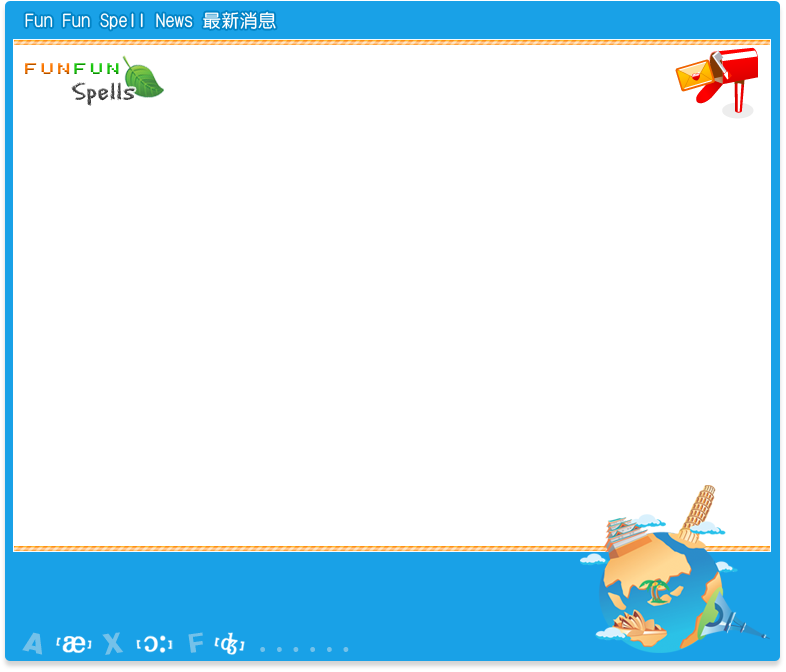
<style>
.page{position:relative;width:786px;height:672px;background:#ffffff}
.page>*{position:absolute;margin:0}
.t1{font:18px "DFYuan-Md-HK-BF";letter-spacing:0.02em;color:#ffffff}
.t2{font:17.3px "FFFIntelligentThinCondensed";letter-spacing:0.2em}
.t3{font:26px "EraserDust";letter-spacing:0.02em;color:#444444}
.t4{font:26.9px "HelveticaLT-Black";letter-spacing:0.02em;color:#74c1e9}
.t5{font:25.8px "Addled";letter-spacing:0.02em;color:#74c1e9}
.t6{font:23.4px "Addled";letter-spacing:0.02em;color:#74c1e9}
</style>
<div class="page">
<p class="t1" style="left:25px;top:11px;width:251px;height:19px">Fun Fun Spell News 最新消息</p>
<p class="t2" style="left:25px;top:63px;width:94px;height:11px">FunFun</p>
<p class="t3" style="left:71px;top:82px;width:64px;height:24px">Spells</p>
<p class="t4" style="left:22px;top:632px;width:21px;height:23px;rotate:13deg">A</p>
<p class="t5" style="left:102px;top:632px;width:22px;height:23px;rotate:-9deg">X</p>
<p class="t6" style="left:188px;top:632px;width:15px;height:21px;rotate:-8deg">F</p>
<p class="t6" style="left:260px;top:647px;width:89px;height:5px">. . . . . .</p>
</div>
